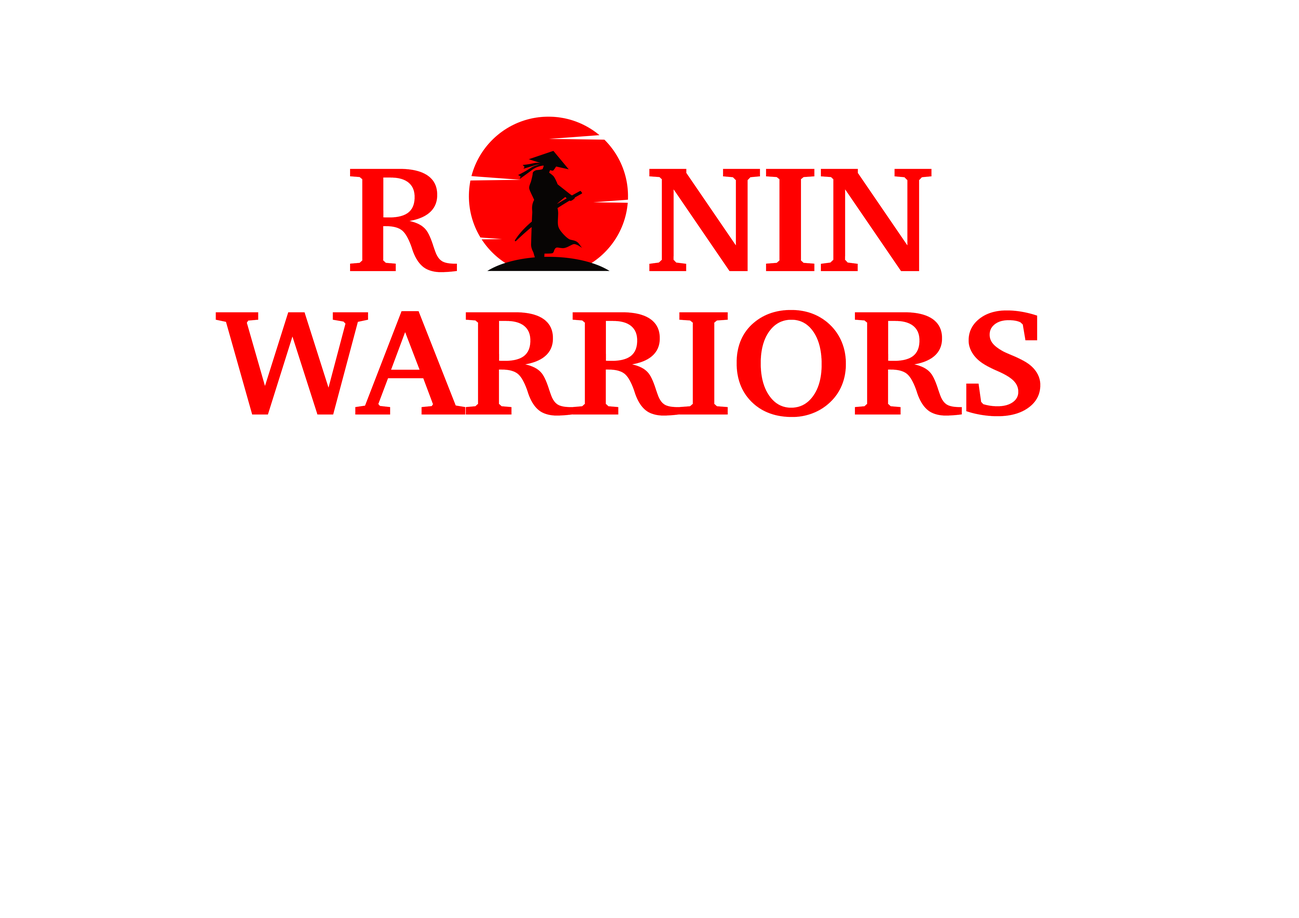
<style>
.page{position:relative;width:1299px;height:918px;background:#ffffff}
.page>*{position:absolute;margin:0}
.t1{font:152.4px "Charter-Bold";letter-spacing:-0.01em;color:#ff0000;scale:1.06 1}
</style>
<div class="page">
<p class="t1" style="left:350px;top:169px;width:107px;height:103px">R</p>
<p class="t1" style="left:649px;top:169px;width:282px;height:102px">NIN</p>
<p class="t1" style="left:216px;top:310px;width:824px;height:107px">WARRIORS</p>
</div>
